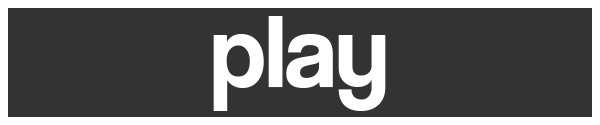
<style>
.page{position:relative;width:600px;height:125px;background:#333333}
.page>*{position:absolute;margin:0}
.t1{font:104.9px "CoolveticaRg-Regular";color:#ffffff}
</style>
<div class="page">
<p class="t1" style="left:213px;top:16px;width:173px;height:95px">play</p>
</div>
